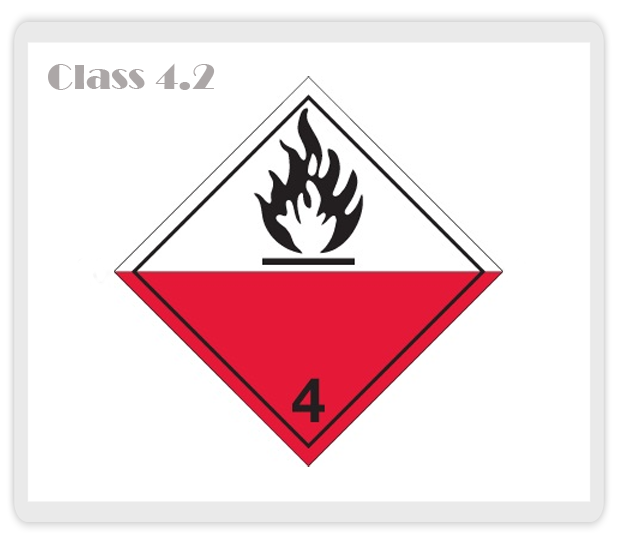
<style>
.page{position:relative;width:618px;height:544px;background:#ffffff}
.page>*{position:absolute;margin:0}
.t1{font:36px "Broadway";color:#aca7a7}
</style>
<div class="page">
<p class="t1" style="left:48px;top:63px;width:167px;height:27px">Class 4.2</p>
</div>
